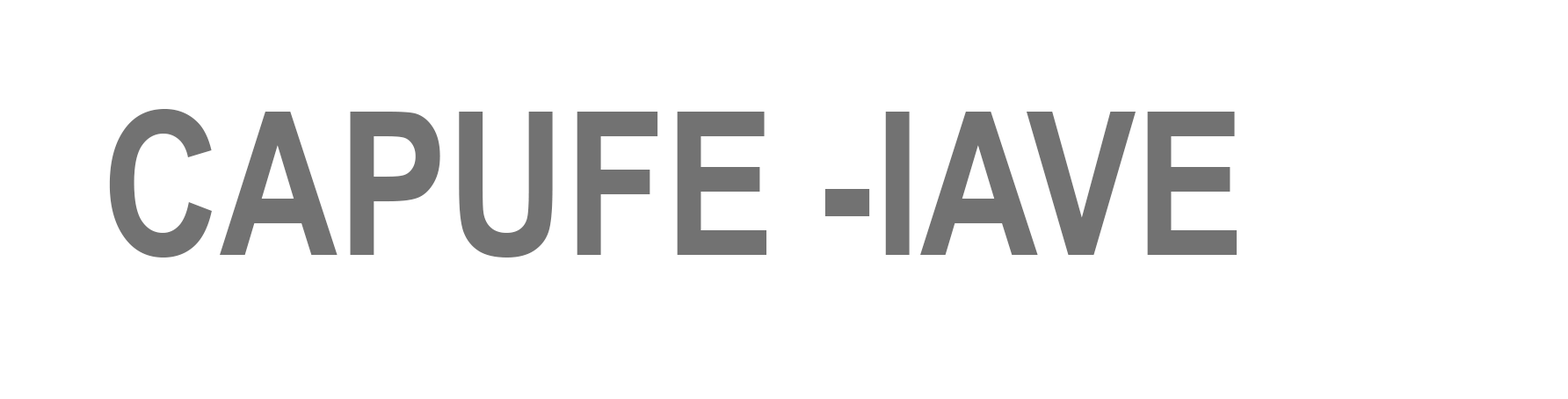
<style>
.page{position:relative;width:1568px;height:399px;background:#ffffff}
.page>*{position:absolute;margin:0}
.t1{font:200.7px "ArialNarrow-Bold";color:#727272}
</style>
<div class="page">
<p class="t1" style="left:109px;top:109px;width:1128px;height:149px">CAPUFE -IAVE</p>
</div>
